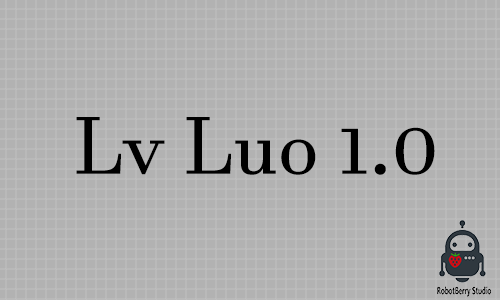
<style>
.page{position:relative;width:500px;height:300px;background:#b2b2b2}
.page>*{position:absolute;margin:0}
.t1{font:80px "JavaneseText";color:#000000}
</style>
<div class="page">
<p class="t1" style="left:76px;top:117px;width:359px;height:58px">Lv Luo 1.0</p>
</div>
